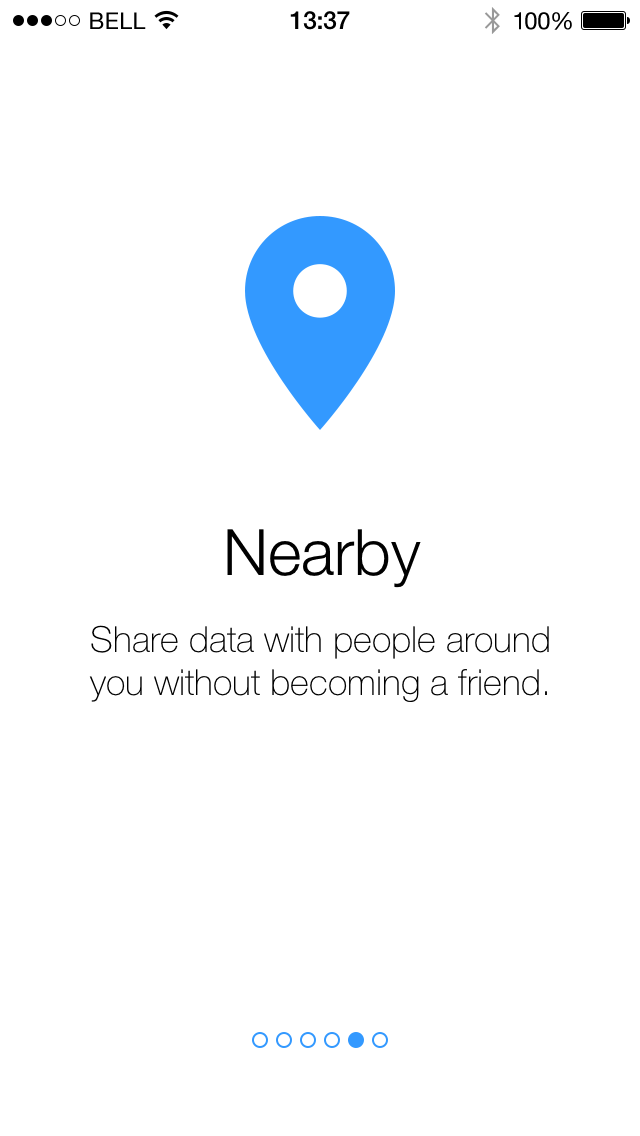
<style>
.page{position:relative;width:640px;height:1136px;background:#ffffff}
.page>*{position:absolute;margin:0}
.t1{font:64px "HelveticaNeue-Light";color:#000000}
.t2{font:36px "HelveticaNeue-Thin";color:#000000}
</style>
<div class="page">
<p class="t1" style="left:227px;top:529px;width:194px;height:59px">Nearby</p>
<p class="t2" style="left:89px;top:625px;width:460px;height:77px;text-align:center">Share data with people around<br>you without becoming a friend.</p>
</div>
